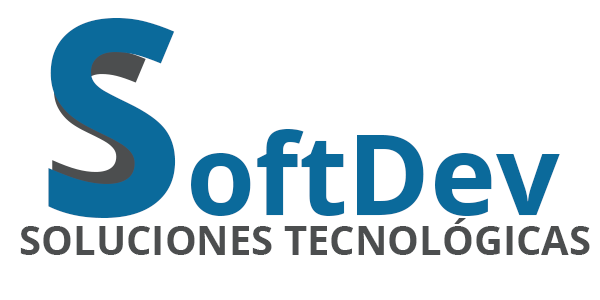
<style>
.page{position:relative;width:600px;height:300px;background:#ffffff}
.page>*{position:absolute;margin:0}
.t1{font:112px "OpenSans-Bold";color:#0b6a9b}
.t2{font:272px "OpenSans-Bold";color:#0b6a9b}
.t3{font:40px "OpenSans-Bold";color:#4c4e4f}
</style>
<div class="page">
<p class="t1" style="left:48px;top:17px;width:512px;height:201px"><span class="t2">S</span>oftDev</p>
<p class="t3" style="left:20px;top:218px;width:570px;height:37px">SOLUCIONES TECNOLÓGICAS</p>
</div>
